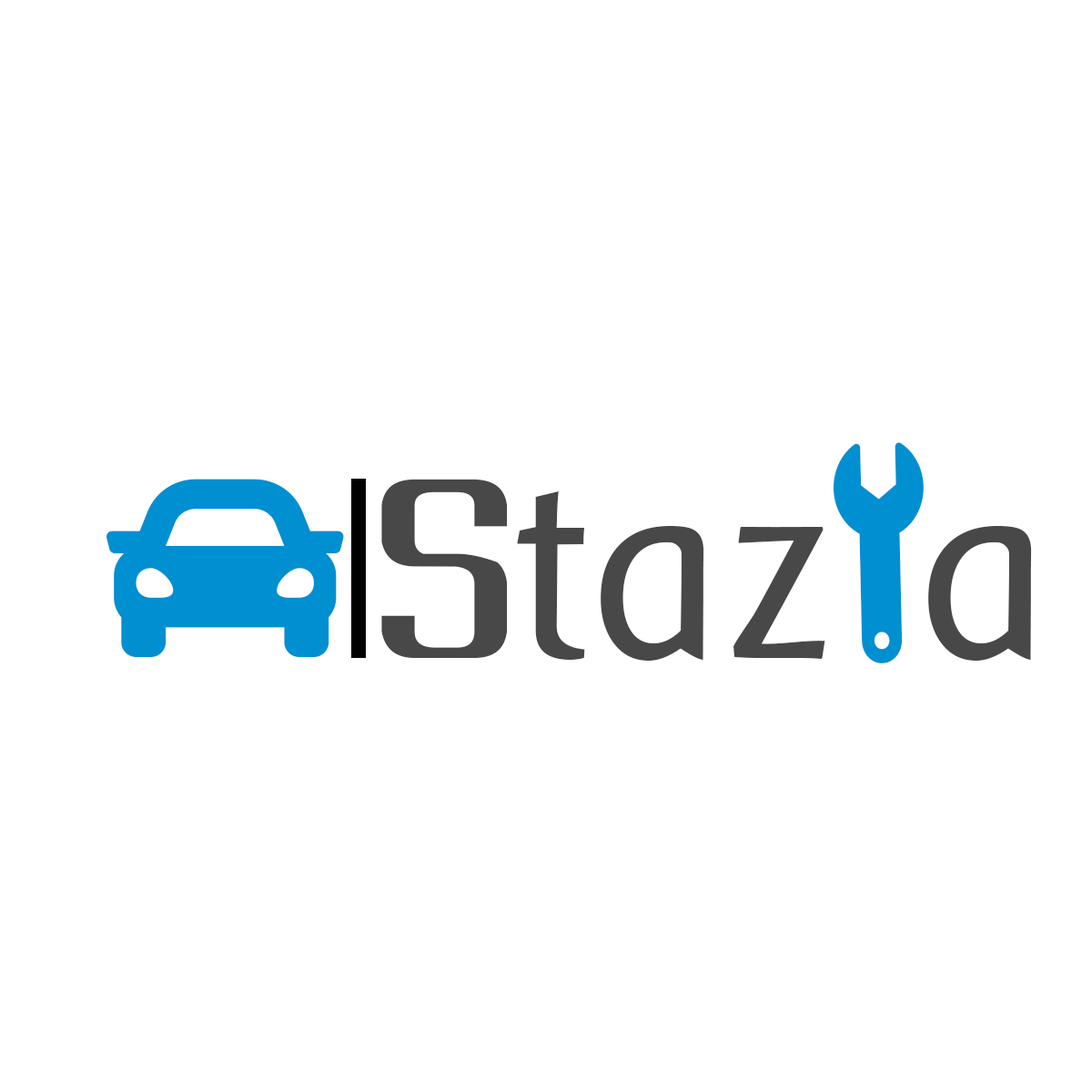
<style>
.page{position:relative;width:1092px;height:1092px;background:#ffffff}
.page>*{position:absolute;margin:0}
.t1{font:262.5px "BaarSophia";color:#484848}
.t2{font:262.5px "Cabaret";color:#484848}
</style>
<div class="page">
<p class="t1" style="left:381px;top:479px;width:444px;height:182px"><span class="t2">S</span>taz</p>
<p class="t1" style="left:928px;top:526px;width:104px;height:135px">a</p>
</div>
